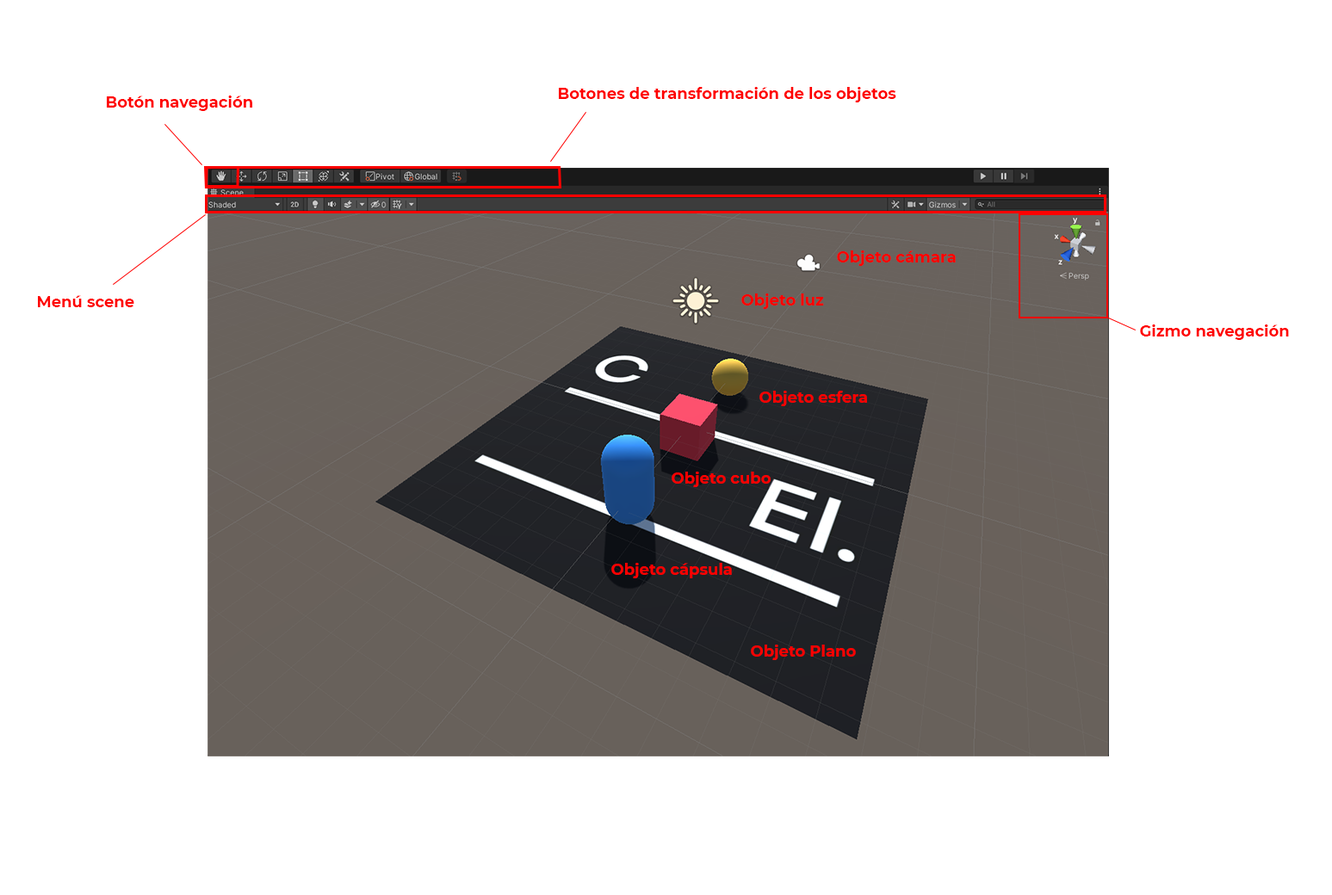
<style>
.page{position:relative;width:1332px;height:895px;background:#ffffff}
.page>*{position:absolute;margin:0}
.t1{font:15.5px "Montserrat-Bold";color:#fe0000}
</style>
<div class="page">
<p class="t1" style="left:559px;top:87px;width:337px;height:15px">Botones de transformación de los objetos</p>
<p class="t1" style="left:107px;top:96px;width:145px;height:15px">Botón navegación</p>
<p class="t1" style="left:837px;top:251px;width:119px;height:15px">Objeto cámara</p>
<p class="t1" style="left:741px;top:294px;width:83px;height:15px">Objeto luz</p>
<p class="t1" style="left:38px;top:295px;width:96px;height:12px">Menú scene</p>
<p class="t1" style="left:1140px;top:325px;width:149px;height:15px">Gizmo navegación</p>
<p class="t1" style="left:759px;top:391px;width:108px;height:15px">Objeto esfera</p>
<p class="t1" style="left:672px;top:472px;width:99px;height:15px">Objeto cubo</p>
<p class="t1" style="left:611px;top:563px;width:121px;height:16px">Objeto cápsula</p>
<p class="t1" style="left:751px;top:645px;width:105px;height:15px">Objeto Plano</p>
</div>
